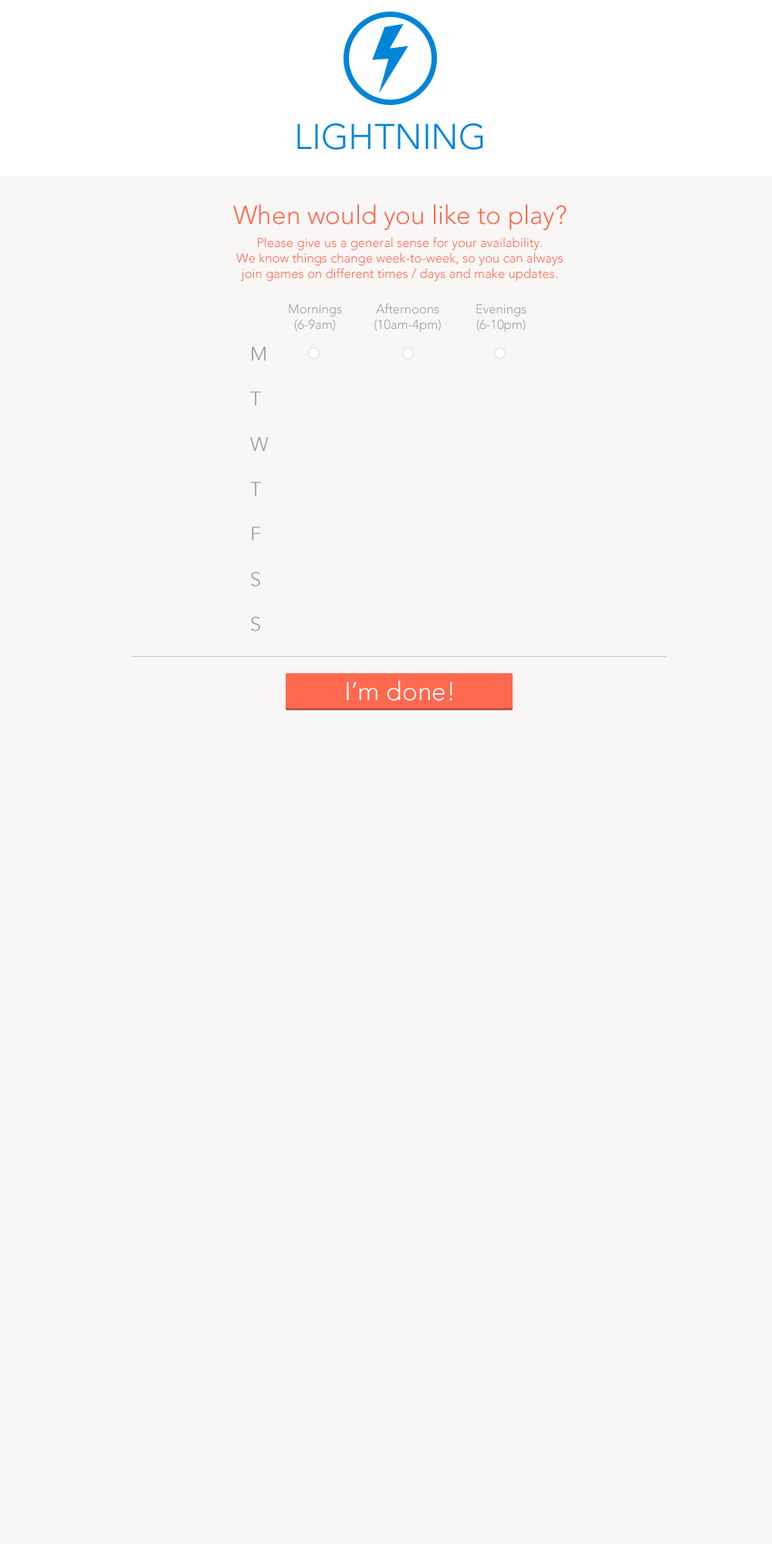
<style>
.page{position:relative;width:772px;height:1544px;background:#f9f7f6}
.page>*{position:absolute;margin:0}
.t1{font:35.4px "AvenirLTPro-Light";color:#0085d7;text-transform:uppercase}
.t2{font:25.7px "AvenirLTPro-Light";color:#ff6950}
.t3{font:12.9px "AvenirLTPro-Light";color:#ff6950}
.t4{font:12.9px "AvenirLTPro-Light";color:#9b9b9b}
.t5{font:19.3px/45px "AvenirLTPro-Light";color:#9b9b9b}
.t6{font:25.7px "AvenirLTPro-Light";color:#ffffff}
</style>
<div class="page">
<p class="t1" style="left:297px;top:123px;width:186px;height:27px">Lightning</p>
<p class="t2" style="left:233px;top:204px;width:334px;height:26px">When would you like to play?</p>
<p class="t3" style="left:236px;top:237px;width:327px;height:44px;text-align:center">Please give us a general sense for your availability. <br>We know things change week-to-week, so you can always <br>join games on different times / days and make updates.</p>
<p class="t4" style="left:289px;top:304px;width:53px;height:27px;text-align:center">Mornings<br>(6-9am)</p>
<p class="t4" style="left:374px;top:303px;width:67px;height:29px;text-align:center">Afternoons<br>(10am-4pm)</p>
<p class="t4" style="left:476px;top:304px;width:51px;height:28px;text-align:center">Evenings<br>(6-10pm)</p>
<p class="t5" style="left:250px;top:347px;width:19px;height:285px">M<br>T<br>W<br>T<br>F<br>S<br>S</p>
<p class="t6" style="left:347px;top:680px;width:105px;height:21px">I’m done!</p>
</div>
